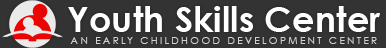
<style>
.page{position:relative;width:386px;height:48px;background:#333333}
.page>*{position:absolute;margin:0}
.t1{font:35.4px "CenturyGothic-Bold";color:#ffffff}
.t2{font:10.4px "CenturyGothic";letter-spacing:0.2em;color:#d2d2d2}
</style>
<div class="page">
<p class="t1" style="left:68px;top:6px;width:313px;height:26px">Youth Skills Center</p>
<p class="t2" style="left:70px;top:37px;width:307px;height:7px">AN EARLY CHILDHOOD DEVELOPMENT CENTER</p>
</div>
